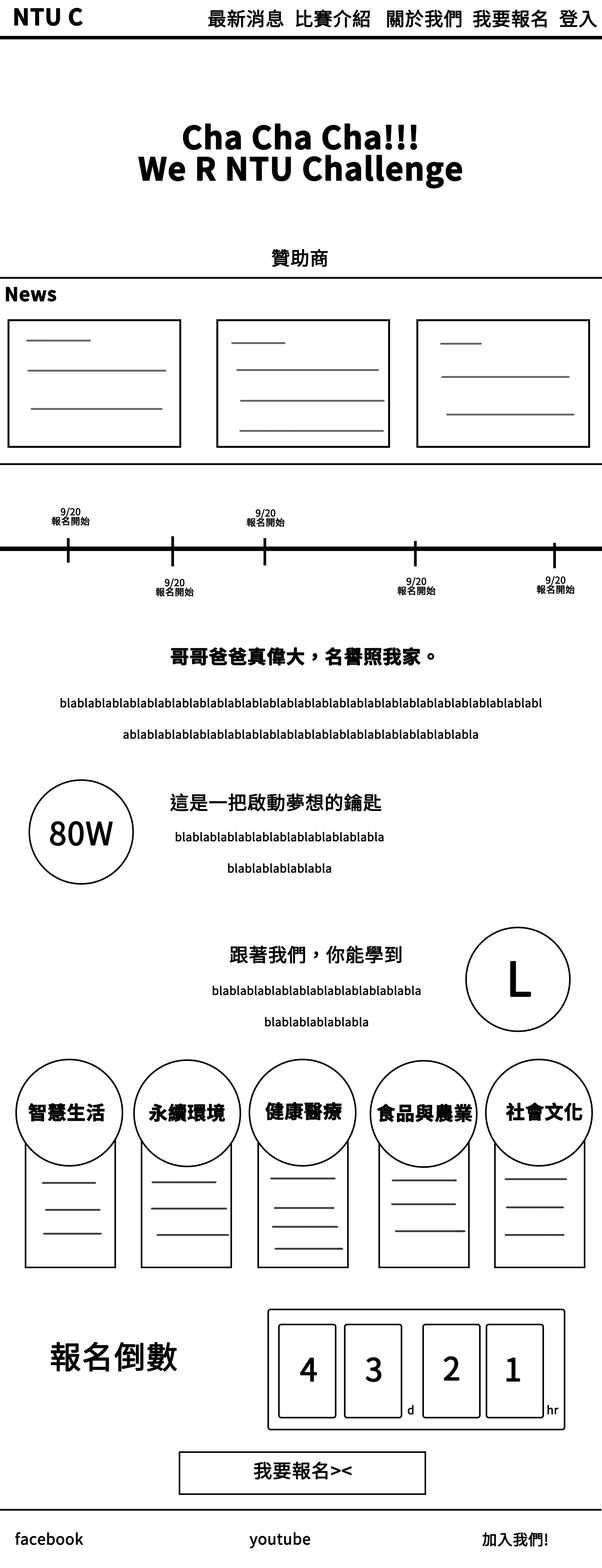
<style>
.page{position:relative;width:602px;height:1568px;background:#ffffff}
.page>*{position:absolute;margin:0}
.t1{font:22.6px "NotoSansCJKtc-Bold";color:#000000;font-weight:bold}
.t2{font:18.8px "NotoSansCJKtc-Regular";color:#000000;font-weight:bold}
.t3{font:31.4px/31.4px "NotoSansCJKtc-Bold";color:#000000;font-weight:bold}
.t4{font:18.8px "NotoSansCJKtc-Bold";color:#000000;font-weight:bold}
.t5{font:9.4px/9.4px "NotoSansCJKtc-Regular";color:#000000;font-weight:bold}
.t6{font:11.3px/31.4px "NotoSansCJKtc-Regular";color:#000000;font-weight:bold}
.t7{font:31.4px "NotoSansCJKtc-Regular";color:#000000;font-weight:bold}
.t8{font:47px "NotoSansCJKtc-Regular";color:#000000;font-weight:bold}
.t9{font:11.3px "NotoSansCJKtc-Regular";color:#ffffff;font-weight:bold}
.t10{font:11.3px "NotoSansCJKtc-Regular";color:#000000;font-weight:bold}
.t11{font:15.1px "NotoSansCJKtc-Regular";color:#000000;font-weight:bold}
</style>
<div class="page">
<p class="t1" style="left:14px;top:8px;width:69px;height:18px">NTU C</p>
<p class="t2" style="left:208px;top:9px;width:389px;height:19px">最新消息  比賽介紹   關於我們  我要報名  登入</p>
<p class="t3" style="left:138px;top:123px;width:324px;height:65px;text-align:center">Cha Cha Cha!!! <br>We R NTU Challenge</p>
<p class="t2" style="left:272px;top:249px;width:56px;height:18px">贊助商</p>
<p class="t4" style="left:6px;top:287px;width:50px;height:15px">News</p>
<p class="t5" style="left:51px;top:507px;width:39px;height:19px;text-align:center">9/20<br>報名開始</p>
<p class="t5" style="left:246px;top:509px;width:39px;height:18px;text-align:center">9/20<br>報名開始</p>
<p class="t5" style="left:156px;top:578px;width:38px;height:18px;text-align:center">9/20<br>報名開始</p>
<p class="t5" style="left:397px;top:577px;width:39px;height:18px;text-align:center">9/20<br>報名開始</p>
<p class="t5" style="left:537px;top:576px;width:38px;height:18px;text-align:center">9/20<br>報名開始</p>
<p class="t4" style="left:171px;top:647px;width:263px;height:19px">哥哥爸爸真偉大，名譽照我家。</p>
<p class="t6" style="left:61px;top:698px;width:481px;height:41px;text-align:center">blablablablablablablablablablablablablablablablablablablablablablablablablablablablablablablablablablablablablablablablablablablablablablablabla</p>
<p class="t2" style="left:170px;top:793px;width:212px;height:19px">這是一把啟動夢想的鑰匙</p>
<p class="t7" style="left:50px;top:821px;width:63px;height:25px">80W</p>
<p class="t6" style="left:176px;top:832px;width:208px;height:41px;text-align:center">blablablablablablablablablablablablablablablablablabla</p>
<p class="t2" style="left:230px;top:946px;width:172px;height:18px">跟著我們，你能學到</p>
<p class="t8" style="left:510px;top:961px;width:21px;height:36px">L</p>
<p class="t6" style="left:213px;top:986px;width:208px;height:41px;text-align:center">blablablablablablablablablablablablablablablablablabla</p>
<p class="t4" style="left:29px;top:1103px;width:76px;height:19px">智慧生活</p>
<p class="t4" style="left:149px;top:1103px;width:76px;height:19px">永續環境</p>
<p class="t4" style="left:265px;top:1102px;width:77px;height:18px">健康醫療</p>
<p class="t4" style="left:377px;top:1104px;width:95px;height:18px">食品與農業</p>
<p class="t4" style="left:506px;top:1102px;width:77px;height:19px">社會文化</p>
<p class="t7" style="left:51px;top:1342px;width:126px;height:30px">報名倒數</p>
<p class="t7" style="left:300px;top:1358px;width:17px;height:24px">4</p>
<p class="t7" style="left:366px;top:1357px;width:16px;height:25px">3</p>
<p class="t7" style="left:444px;top:1356px;width:15px;height:25px">2</p>
<p class="t7" style="left:506px;top:1358px;width:14px;height:24px">1</p>
<p class="t9" style="left:402px;top:1405px;width:12px;height:10px">s<span class="t10">d</span></p>
<p class="t10" style="left:548px;top:1405px;width:11px;height:9px">hr</p>
<p class="t2" style="left:254px;top:1461px;width:98px;height:19px">我要報名&gt;&lt;</p>
<p class="t11" style="left:15px;top:1532px;width:68px;height:13px">facebook</p>
<p class="t11" style="left:250px;top:1532px;width:60px;height:16px">youtube</p>
<p class="t11" style="left:482px;top:1532px;width:66px;height:15px">加入我們!</p>
</div>
